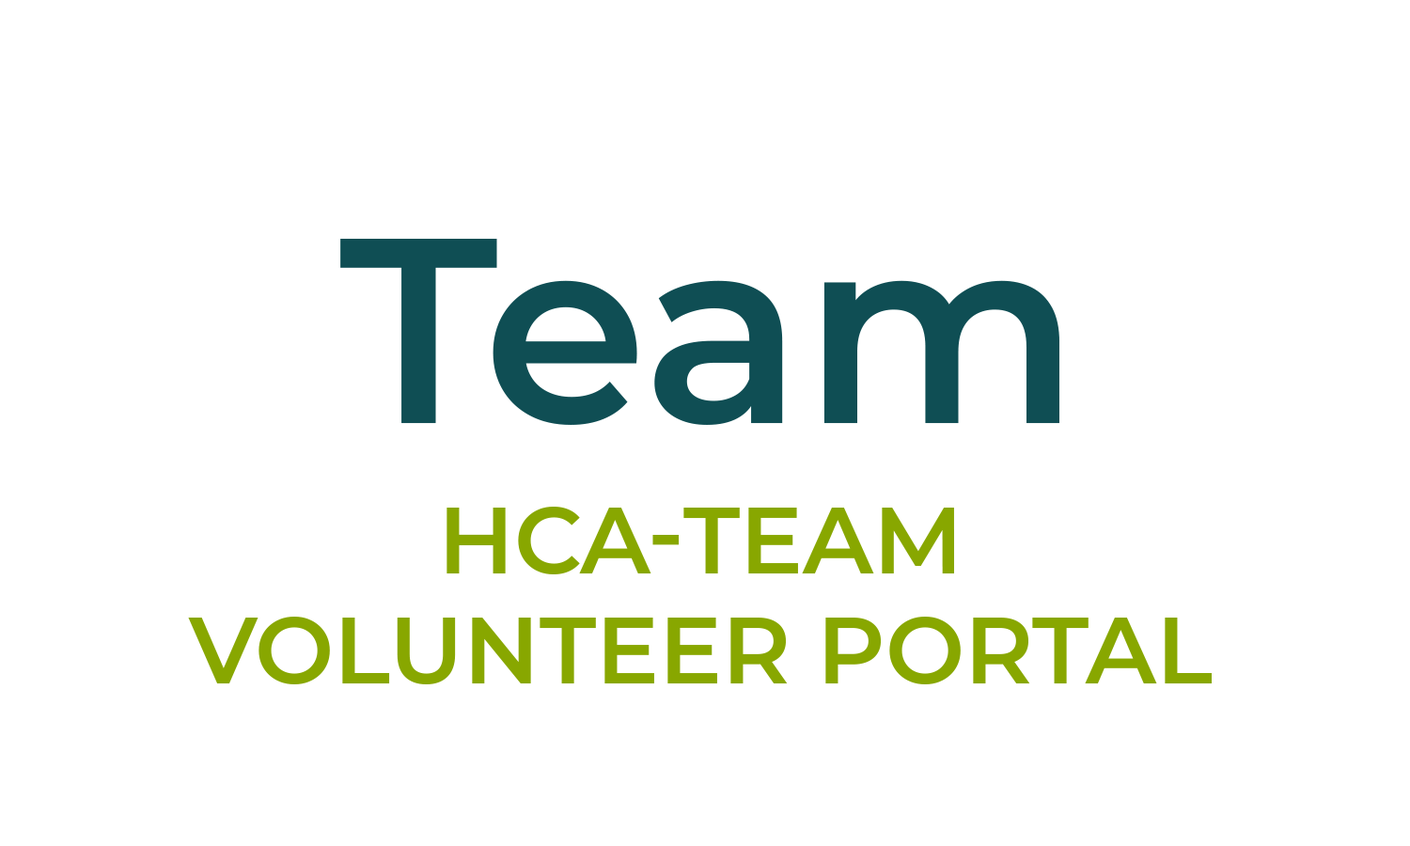
<style>
.page{position:relative;width:1410px;height:846px;background:#ffffff}
.page>*{position:absolute;margin:0}
.t1{font:263.1px "Montserrat-SemiBold";color:#0f4e54}
.t2{font:94px/0.2px "Montserrat-SemiBold";color:#88a700;text-transform:uppercase}
</style>
<div class="page">
<p class="t1" style="left:340px;top:239px;width:719px;height:186px">Team</p>
<p class="t2" style="left:188px;top:507px;width:1023px;height:177px;text-align:center">HCA-TEAM<br>volunteer portal</p>
</div>
